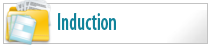
<style>
.page{position:relative;width:211px;height:47px;background:#ffffff}
.page>*{position:absolute;margin:0}
.t1{font:24px "MyriadPro-SemiboldCond";color:#11839a;scale:0.78 1}
</style>
<div class="page">
<p class="t1" style="left:58px;top:13px;width:58px;height:17px">Induction</p>
</div>
